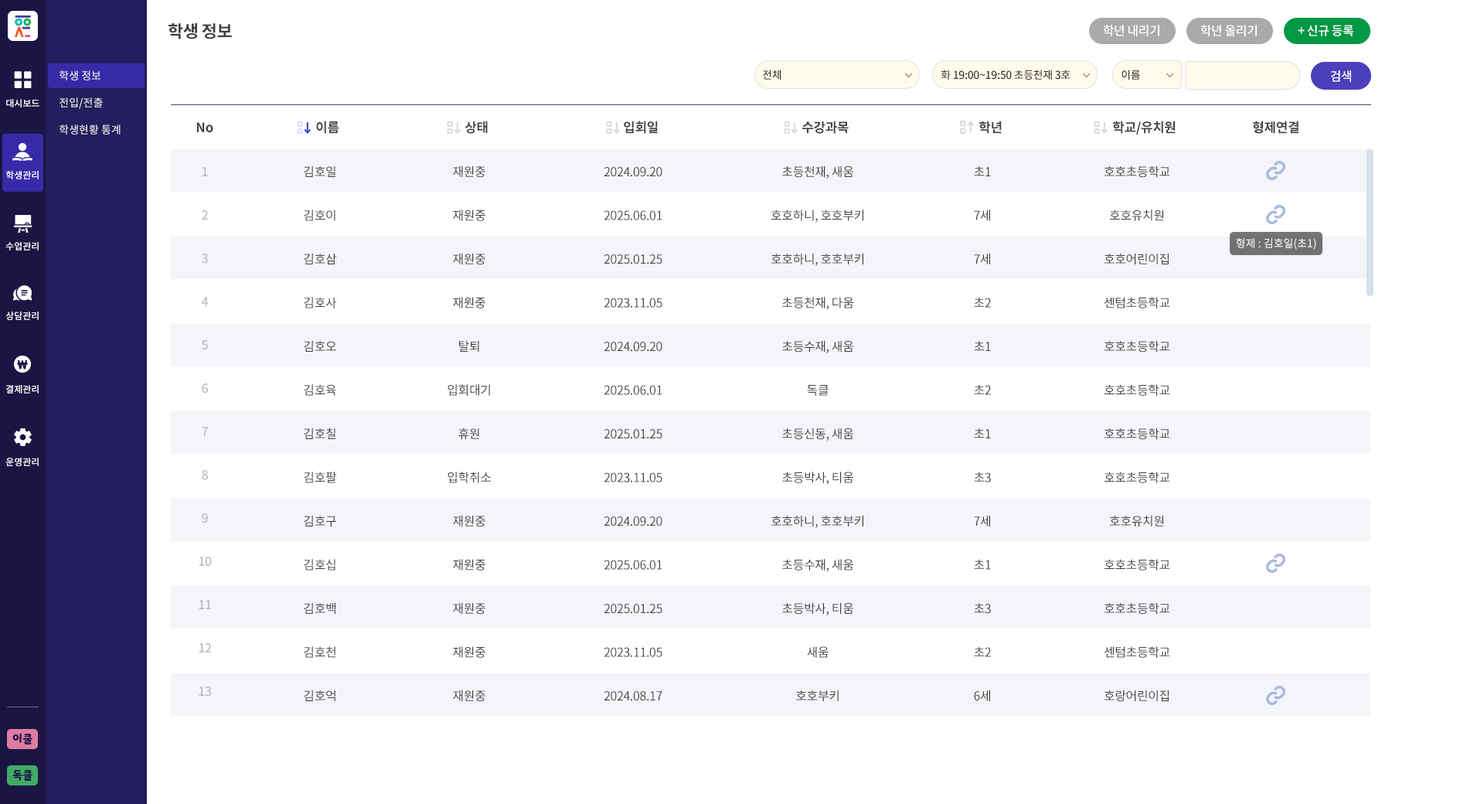
<style>
.page{position:relative;width:1484px;height:804px;background:#ffffff}
.page>*{position:absolute;margin:0}
.t1{font:17px "NotoSansCJKkr-Bold";letter-spacing:-0.025em;color:#3e3e43;text-transform:uppercase}
.t2{font:12.4px "NotoSansCJKkr-Medium";letter-spacing:-0.025em;color:#ffffff}
.t3{font:10.8px/27px "NotoSansCJKkr-Medium";color:#e1e1e1}
.t4{font:10.8px "NotoSansCJKkr-Medium";letter-spacing:-0.025em;color:#323232}
.t5{font:9.3px "NotoSansCJKkr-Medium";color:#ffffff}
.t6{font:13.1px "NotoSansCJKkr-Bold";letter-spacing:-0.025em;color:#404040}
.t7{font:12.4px/43.3px "NotoSansCJKkr-Medium";letter-spacing:-0.025em;color:#a8a8a8}
.t8{font:12.4px/43.7px "NotoSansCJKkr-Regular";letter-spacing:-0.025em;color:#404040}
.t9{font:10.8px "NotoSansCJKkr-Regular";color:#ffffff}
.t10{font:10.8px "YoonSoftSlime";color:#1a1543}
</style>
<div class="page">
<p class="t1" style="left:168px;top:23px;width:64px;height:16px">학생 정보</p>
<p class="t2" style="left:1103px;top:25px;width:56px;height:11px">학년 내리기</p>
<p class="t2" style="left:1200px;top:25px;width:57px;height:11px">학년 올리기</p>
<p class="t2" style="left:1297px;top:25px;width:56px;height:11px">+ 신규 등록</p>
<p class="t3" style="left:60px;top:70px;width:61px;height:64px">학생 정보<br>전입/전출<br>학생현황 통계</p>
<p class="t4" style="left:763px;top:70px;width:18px;height:10px">전체</p>
<p class="t4" style="left:940px;top:70px;width:130px;height:10px">화 19:00~19:50 초등천재 3호</p>
<p class="t4" style="left:1121px;top:70px;width:19px;height:10px">이름</p>
<p class="t2" style="left:1330px;top:70px;width:21px;height:12px">검색</p>
<p class="t5" style="left:6px;top:99px;width:33px;height:8px">대시보드</p>
<p class="t6" style="left:196px;top:122px;width:17px;height:11px">No</p>
<p class="t6" style="left:316px;top:121px;width:23px;height:13px">이름</p>
<p class="t6" style="left:464px;top:121px;width:24px;height:13px">상태</p>
<p class="t6" style="left:624px;top:121px;width:34px;height:13px">입회일</p>
<p class="t6" style="left:802px;top:121px;width:47px;height:13px">수강과목</p>
<p class="t6" style="left:979px;top:121px;width:23px;height:13px">학년</p>
<p class="t6" style="left:1113px;top:121px;width:62px;height:13px">학교/유치원</p>
<p class="t6" style="left:1253px;top:121px;width:45px;height:13px">형제연결</p>
<p class="t5" style="left:6px;top:171px;width:33px;height:8px">학생관리</p>
<p class="t7" style="left:199px;top:167px;width:13px;height:529px;text-align:center;opacity:0.8">1<br>2<br>3<br>4<br>5<br>6<br>7<br>8<br>9<br>10<br>11<br>12<br>13</p>
<p class="t8" style="left:304px;top:165px;width:33px;height:536px">김호일<br>김호이<br>김호삼<br>김호사<br>김호오<br>김호육<br>김호칠<br>김호팔<br>김호구<br>김호십<br>김호백<br>김호천<br>김호억</p>
<p class="t8" style="left:447px;top:165px;width:44px;height:537px;text-align:center">재원중<br>재원중<br>재원중<br>재원중<br>탈퇴<br>입회대기<br>휴원<br>입학취소<br>재원중<br>재원중<br>재원중<br>재원중<br>재원중</p>
<p class="t8" style="left:604px;top:167px;width:58px;height:534px;text-align:center">2024.09.20<br>2025.06.01<br>2025.01.25<br>2023.11.05<br>2024.09.20<br>2025.06.01<br>2025.01.25<br>2023.11.05<br>2024.09.20<br>2025.06.01<br>2025.01.25<br>2023.11.05<br>2024.08.17</p>
<p class="t8" style="left:771px;top:165px;width:92px;height:536px;text-align:center">초등천재, 새움<br>호호하니, 호호부키<br>호호하니, 호호부키<br>초등천재, 다움<br>초등수재, 새움<br>독클<br>초등신동, 새움<br>초등박사, 티움<br>호호하니, 호호부키<br>초등수재, 새움<br>초등박사, 티움<br>새움<br>호호부키</p>
<p class="t8" style="left:974px;top:166px;width:17px;height:535px;text-align:center">초1<br>7세<br>7세<br>초2<br>초1<br>초2<br>초1<br>초3<br>7세<br>초1<br>초3<br>초2<br>6세</p>
<p class="t8" style="left:1104px;top:166px;width:66px;height:536px;text-align:center">호호초등학교<br>호호유치원<br>호호어린이집<br>센텀초등학교<br>호호초등학교<br>호호초등학교<br>호호초등학교<br>호호초등학교<br>호호유치원<br>호호초등학교<br>호호초등학교<br>센텀초등학교<br>호랑어린이집</p>
<p class="t5" style="left:5px;top:242px;width:34px;height:8px">수업관리</p>
<p class="t9" style="left:1236px;top:238px;width:80px;height:12px">형제 : 김호일(초1)</p>
<p class="t5" style="left:5px;top:311px;width:34px;height:9px">상담관리</p>
<p class="t5" style="left:6px;top:385px;width:33px;height:8px">결제관리</p>
<p class="t5" style="left:5px;top:457px;width:34px;height:9px">운영관리</p>
<p class="t10" style="left:12px;top:733px;width:20px;height:11px">이클</p>
<p class="t10" style="left:12px;top:770px;width:20px;height:10px">독클</p>
</div>
